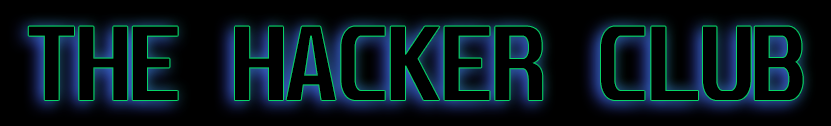
<style>
.page{position:relative;width:831px;height:126px;background:#000000}
.page>*{position:absolute;margin:0}
.t1{font:91px "Unispace-Bold";letter-spacing:-0.04em;color:#000000}
</style>
<div class="page">
<p class="t1" style="left:28px;top:26px;width:775px;height:74px">THE HACKER CLUB</p>
</div>
